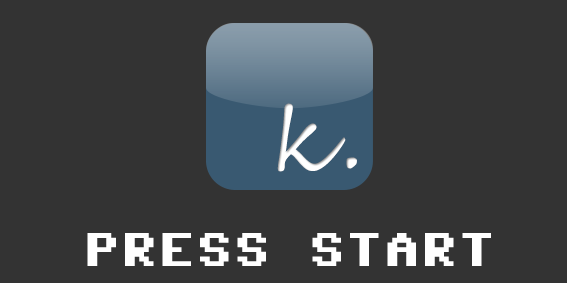
<style>
.page{position:relative;width:567px;height:283px;background:#333333}
.page>*{position:absolute;margin:0}
.t1{font:87.9px "SegoeScript";color:#ffffff}
.t2{font:48px "Commodore-64-Pixelized";color:#ffffff}
</style>
<div class="page">
<p class="t1" style="left:277px;top:103px;width:80px;height:69px">k.</p>
<p class="t2" style="left:87px;top:233px;width:404px;height:33px">PRESS START</p>
</div>
